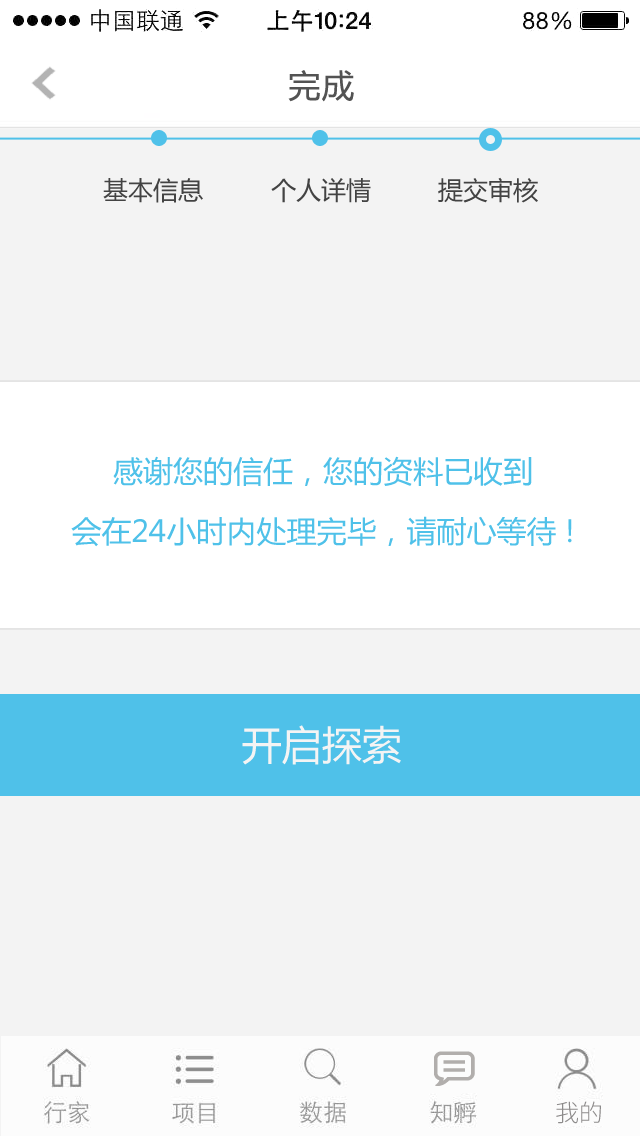
<style>
.page{position:relative;width:640px;height:1136px;background:#f3f3f3}
.page>*{position:absolute;margin:0}
.t1{font:32px "MicrosoftYaHei";letter-spacing:0.05em;color:#535353}
.t2{font:25px "MicrosoftYaHei";color:#434343}
.t3{font:30px/60px "MicrosoftYaHei";color:#4fc1e9}
.t4{font:40px "MicrosoftYaHei";color:#f4f4f4}
.t5{font:24px "SourceHanSansCN-Light";color:#8d8b8b}
</style>
<div class="page">
<p class="t1" style="left:288px;top:70px;width:66px;height:32px">完成</p>
<p class="t2" style="left:103px;top:178px;width:100px;height:25px">基本信息</p>
<p class="t2" style="left:271px;top:178px;width:100px;height:25px">个人详情</p>
<p class="t2" style="left:438px;top:177px;width:100px;height:26px">提交审核</p>
<p class="t3" style="left:71px;top:456px;width:501px;height:91px;text-align:center">感谢您的信任，您的资料已收到<br>会在24小时内处理完毕，请耐心等待 !</p>
<p class="t4" style="left:242px;top:725px;width:159px;height:40px">开启探索</p>
<p class="t5" style="left:556px;top:1101px;width:45px;height:23px">我的</p>
</div>
